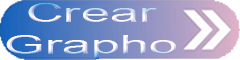
<style>
.page{position:relative;width:240px;height:60px}
.page>*{position:absolute;margin:0}
.t1{font:26px "ArialMT";scale:2 1}
</style>
<div class="page">
<p class="t1" style="left:6px;top:3px;width:170px;height:56px;text-align:center">Crear<br>Grapho</p>
</div>
